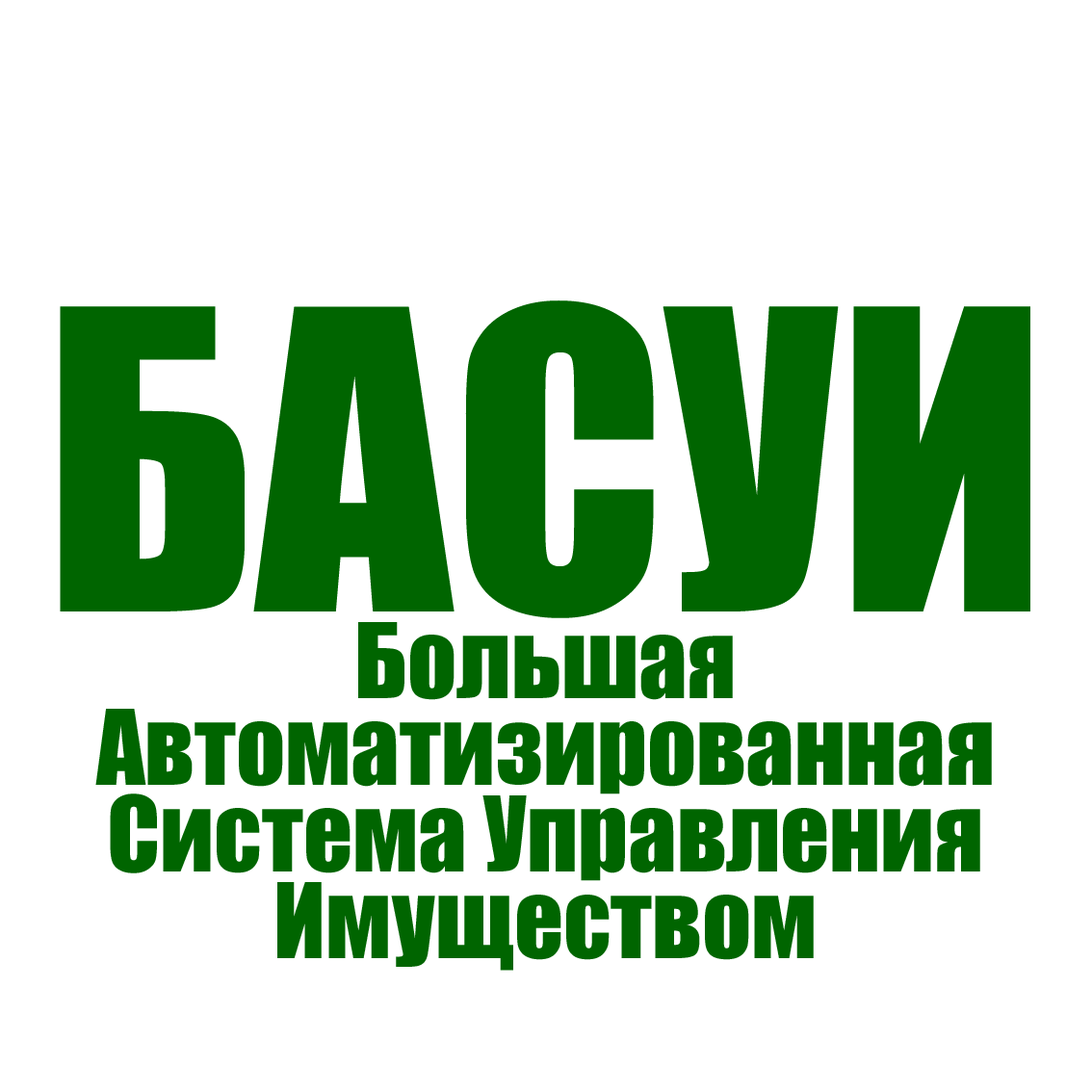
<style>
.page{position:relative;width:1092px;height:1092px;background:#ffffff}
.page>*{position:absolute;margin:0}
.t1{font:96.3px/86.7px "Impact";color:#006500}
.t2{font:385.2px/86.7px "Impact";color:#006500}
</style>
<div class="page">
<p class="t1" style="left:60px;top:300px;width:970px;height:671px;text-align:center"><span class="t2">БАСУИ<br></span>Большая Автоматизированная Система Управления Имуществом</p>
</div>
